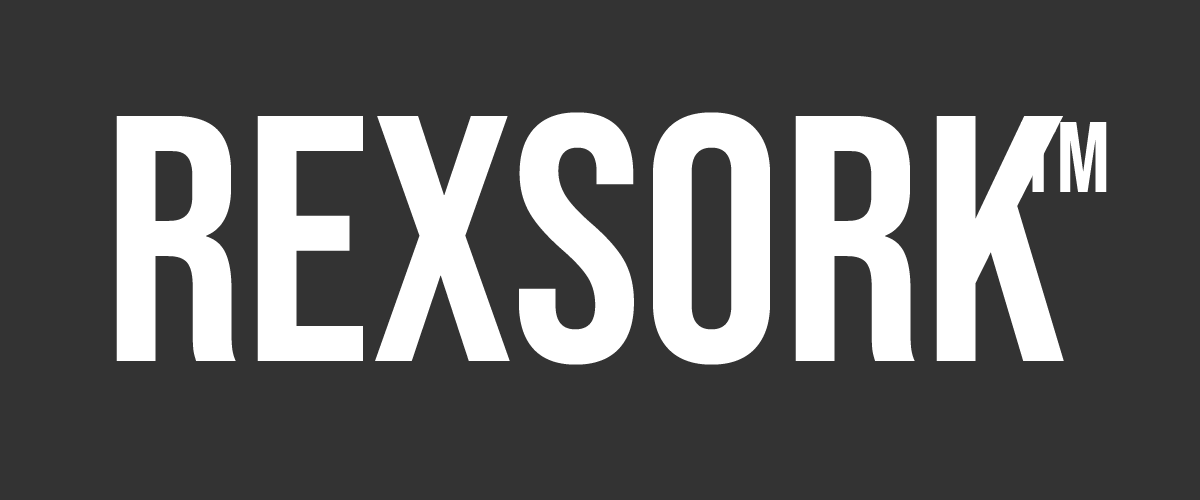
<style>
.page{position:relative;width:1200px;height:500px;background:#333333}
.page>*{position:absolute;margin:0}
.t1{font:350px "BebasNeue-Regular";color:#ffffff}
.t2{font:100px "BebasNeue-Regular";color:#ffffff}
</style>
<div class="page">
<p class="t1" style="left:116px;top:112px;width:948px;height:253px">RExSork</p>
<p class="t2" style="left:1021px;top:122px;width:86px;height:70px">Tm</p>
</div>
